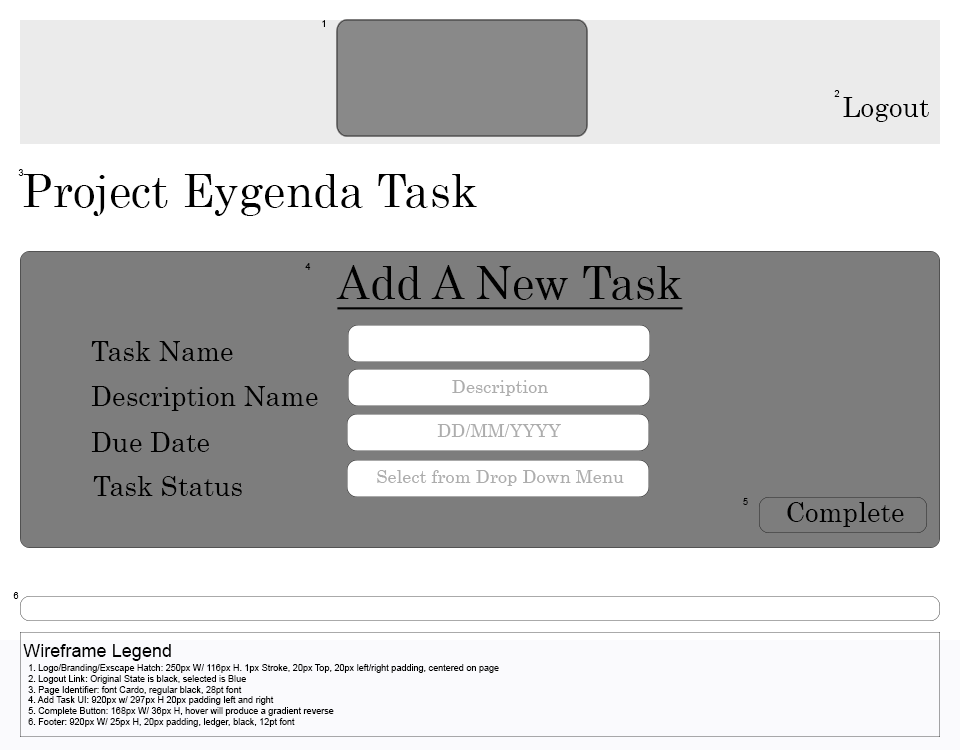
<style>
.page{position:relative;width:960px;height:750px;background:#ffffff}
.page>*{position:absolute;margin:0}
.t1{font:9.1px "ArialMT";color:#000000}
.t2{font:27.2px "Century";color:#000000}
.t3{font:45.3px "Century";color:#000000}
.t4{font:45.3px "Century";color:#000000;text-decoration:underline}
.t5{font:18.1px "Century";color:#adadad}
.t6{font:18.1px "ArialMT";color:#000000}
</style>
<div class="page">
<p class="t1" style="left:322px;top:20px;width:3px;height:7px">1</p>
<p class="t1" style="left:834px;top:90px;width:6px;height:7px">2</p>
<p class="t2" style="left:843px;top:97px;width:86px;height:25px">Logout</p>
<p class="t1" style="left:18px;top:169px;width:6px;height:7px">3</p>
<p class="t3" style="left:23px;top:174px;width:454px;height:42px">Project Eygenda Task</p>
<p class="t1" style="left:305px;top:263px;width:6px;height:7px">4</p>
<p class="t4" style="left:336px;top:265px;width:347px;height:45px">Add A New Task</p>
<p class="t2" style="left:91px;top:341px;width:142px;height:20px">Task Name</p>
<p class="t2" style="left:91px;top:386px;width:227px;height:25px">Description Name</p>
<p class="t5" style="left:452px;top:380px;width:96px;height:16px">Description</p>
<p class="t5" style="left:437px;top:424px;width:124px;height:13px">DD/MM/YYYY</p>
<p class="t2" style="left:91px;top:432px;width:118px;height:20px">Due Date</p>
<p class="t5" style="left:377px;top:470px;width:247px;height:16px">Select from Drop Down Menu</p>
<p class="t2" style="left:93px;top:476px;width:149px;height:20px">Task Status</p>
<p class="t1" style="left:743px;top:498px;width:5px;height:7px">5</p>
<p class="t2" style="left:787px;top:502px;width:117px;height:25px">Complete</p>
<p class="t1" style="left:13px;top:592px;width:6px;height:7px">6</p>
<p class="t6" style="left:23px;top:644px;width:148px;height:17px">Wireframe Legend</p>
<p class="t1" style="left:28px;top:664px;width:471px;height:63px">1. Logo/Branding/Exscape Hatch: 250px W/ 116px H. 1px Stroke, 20px Top, 20px left/right padding, centered on page<br>2. Logout Link: Original State is black, selected is Blue<br>3. Page Identifier: font Cardo, regular black, 28pt font<br>4. Add Task UI: 920px w/ 297px H 20px padding left and right <br>5. Complete Button: 168px W/ 36px H, hover will produce a gradient reverse<br>6. Footer: 920px W/ 25px H, 20px padding, ledger, black, 12pt font</p>
</div>
